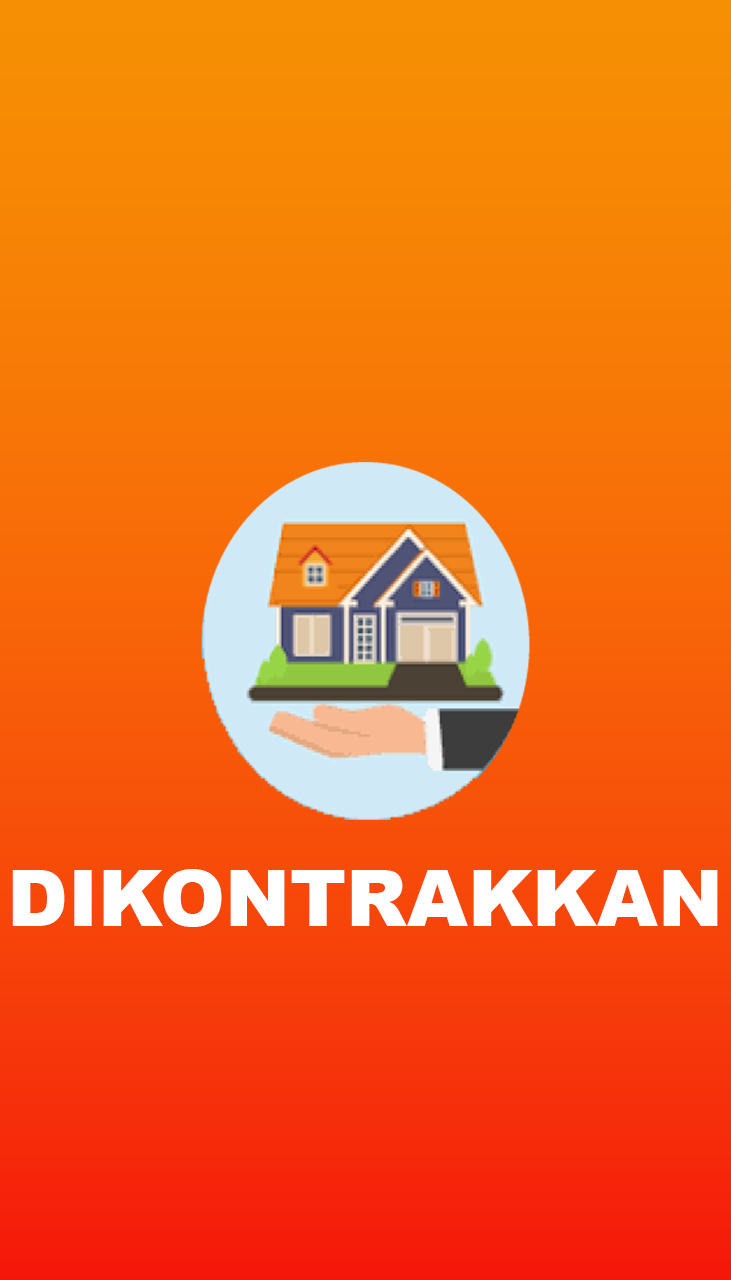
<style>
.page{position:relative;width:731px;height:1280px}
.page>*{position:absolute;margin:0}
.t1{font:77.9px "Arial-Black";color:#ffffff}
</style>
<div class="page">
<p class="t1" style="left:12px;top:869px;width:706px;height:58px">DIKONTRAKKAN</p>
</div>
